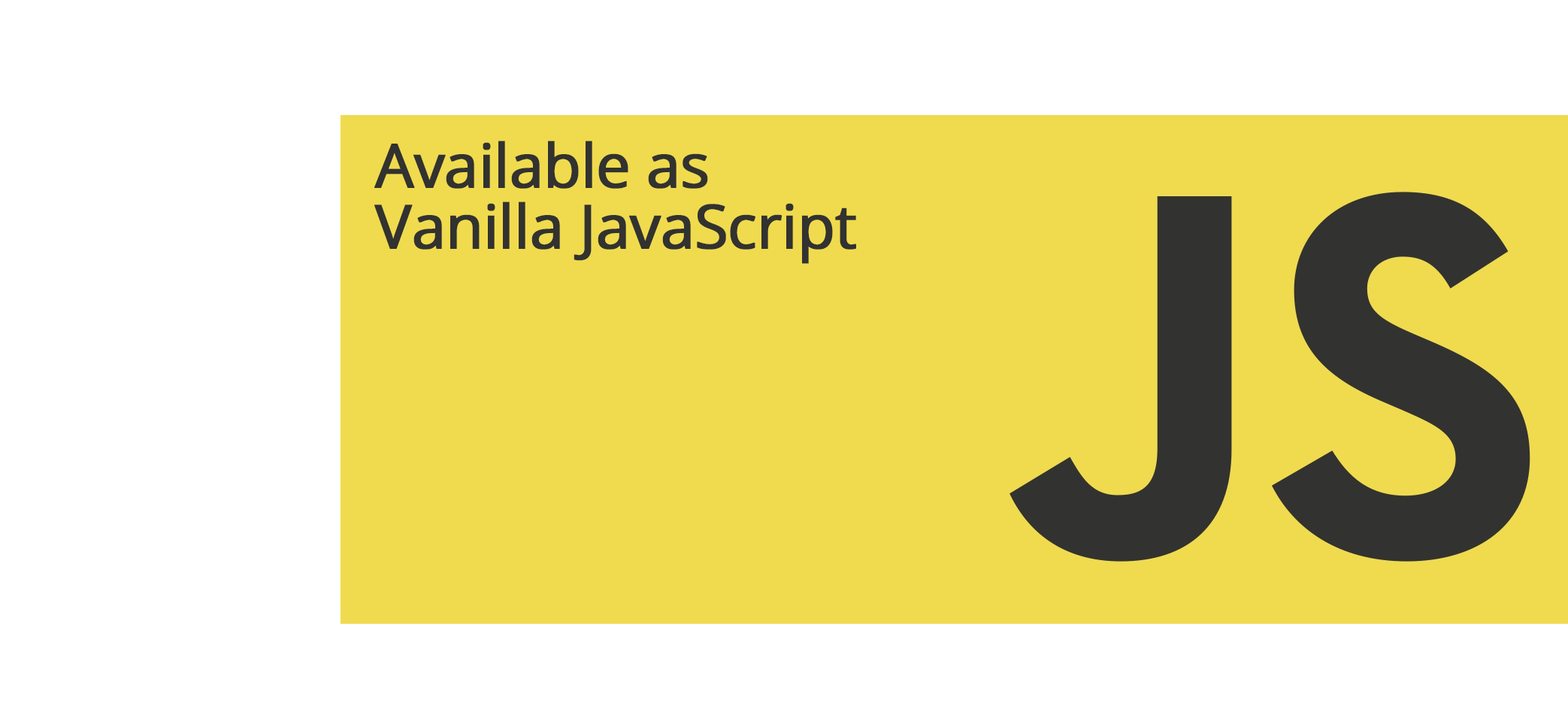
<style>
.page{position:relative;width:1568px;height:712px;background:#ffffff}
.page>*{position:absolute;margin:0}
.t1{font:60.8px/60.8px "OpenSans";letter-spacing:-0.025em;color:#323230;font-weight:bold}
</style>
<div class="page">
<p class="t1" style="left:374px;top:141px;width:482px;height:123px">Available as<br>Vanilla JavaScript</p>
</div>
